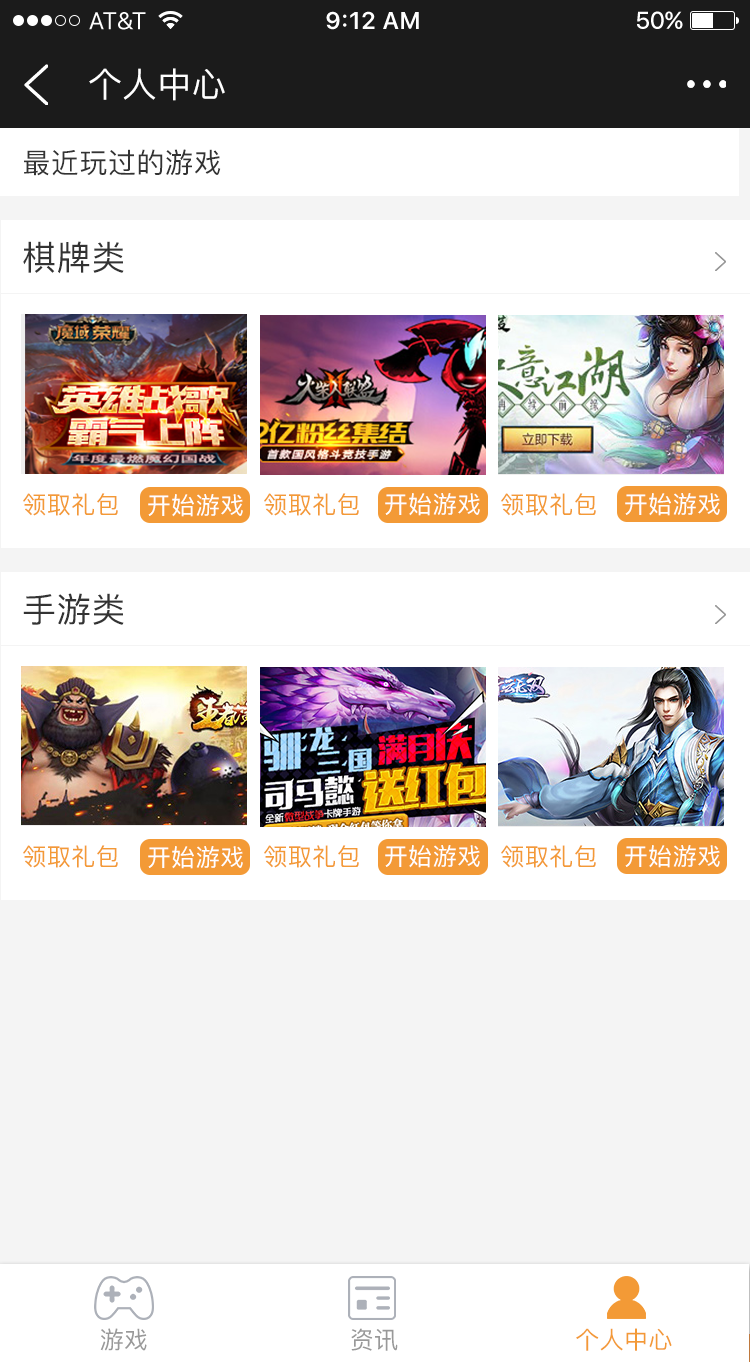
<style>
.page{position:relative;width:750px;height:1362px;background:#ffffff}
.page>*{position:absolute;margin:0}
.t1{font:34px "PingFang-SC-Medium";letter-spacing:0.02em;color:#ffffff}
.t2{font:28px "PingFang-SC-Medium";letter-spacing:0.02em;color:#333333}
.t3{font:34px "PingFang-SC-Medium";letter-spacing:0.02em;color:#333333}
.t4{font:24px "PingFang-SC-Medium";letter-spacing:0.02em;color:#f39a36}
.t5{font:24px "PingFang-SC-Medium";letter-spacing:0.02em;color:#ffffff}
.t6{font:24px "PingFang-SC-Medium";letter-spacing:0.02em;color:#999999}
</style>
<div class="page">
<p class="t1" style="left:89px;top:68px;width:136px;height:33px">个人中心</p>
<p class="t2" style="left:24px;top:149px;width:197px;height:27px">最近玩过的游戏</p>
<p class="t3" style="left:23px;top:241px;width:101px;height:33px">棋牌类</p>
<p class="t4" style="left:23px;top:493px;width:95px;height:23px">领取礼包</p>
<p class="t5" style="left:148px;top:494px;width:95px;height:23px">开始游戏</p>
<p class="t4" style="left:264px;top:493px;width:95px;height:23px">领取礼包</p>
<p class="t5" style="left:385px;top:493px;width:95px;height:23px">开始游戏</p>
<p class="t4" style="left:501px;top:493px;width:95px;height:23px">领取礼包</p>
<p class="t5" style="left:625px;top:493px;width:95px;height:23px">开始游戏</p>
<p class="t3" style="left:23px;top:593px;width:101px;height:32px">手游类</p>
<p class="t4" style="left:23px;top:845px;width:95px;height:23px">领取礼包</p>
<p class="t5" style="left:148px;top:846px;width:95px;height:23px">开始游戏</p>
<p class="t4" style="left:264px;top:845px;width:95px;height:23px">领取礼包</p>
<p class="t5" style="left:385px;top:845px;width:95px;height:23px">开始游戏</p>
<p class="t4" style="left:501px;top:845px;width:95px;height:23px">领取礼包</p>
<p class="t5" style="left:625px;top:845px;width:95px;height:23px">开始游戏</p>
<p class="t6" style="left:100px;top:1328px;width:47px;height:23px">游戏</p>
<p class="t6" style="left:351px;top:1328px;width:47px;height:23px">资讯</p>
<p class="t4" style="left:576px;top:1328px;width:96px;height:23px">个人中心</p>
</div>
